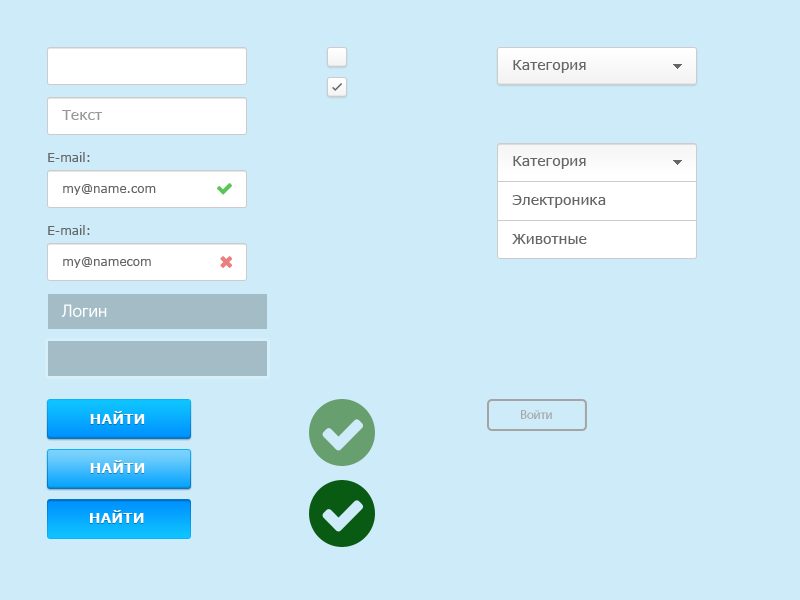
<style>
.page{position:relative;width:800px;height:600px;background:#cdebf8}
.page>*{position:absolute;margin:0}
.t1{font:14px "Verdana";color:#666666}
.t2{font:14px "Verdana";color:#999999}
.t3{font:12px "Verdana";color:#666666}
.t4{font:14px/39px "Verdana";color:#666666}
.t5{font:18px "MyriadPro-Regular";letter-spacing:-0.025em;color:#ffffff}
.t6{font:14px "Verdana-Bold";color:#ffffff}
.t7{font:13px "MyriadPro-Regular";letter-spacing:-0.025em;color:#a4a4a4}
</style>
<div class="page">
<p class="t1" style="left:513px;top:60px;width:73px;height:13px">Категория</p>
<p class="t2" style="left:62px;top:110px;width:40px;height:10px">Текст</p>
<p class="t3" style="left:48px;top:152px;width:42px;height:10px">E-mail:</p>
<p class="t1" style="left:513px;top:156px;width:73px;height:13px">Категория</p>
<p class="t3" style="left:63px;top:184px;width:93px;height:11px">my@name.com</p>
<p class="t4" style="left:512px;top:195px;width:94px;height:49px">Электроника<br>Животные</p>
<p class="t3" style="left:48px;top:225px;width:42px;height:10px">E-mail:</p>
<p class="t3" style="left:63px;top:257px;width:88px;height:11px">my@namecom</p>
<p class="t5" style="left:62px;top:304px;width:45px;height:13px">Логин</p>
<p class="t6" style="left:90px;top:411px;width:55px;height:13px">НАЙТИ</p>
<p class="t7" style="left:521px;top:410px;width:31px;height:9px">Войти</p>
<p class="t6" style="left:90px;top:460px;width:55px;height:13px">НАЙТИ</p>
<p class="t6" style="left:90px;top:510px;width:54px;height:13px">НАЙТИ</p>
</div>
